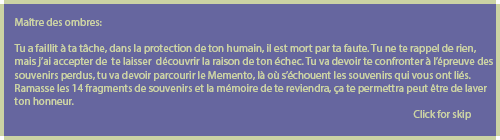
<style>
.page{position:relative;width:500px;height:140px;background:#66669f}
.page>*{position:absolute;margin:0}
.t1{font:11px "MyriadPro-Regular";color:#cbd2a4}
</style>
<div class="page">
<p class="t1" style="left:14px;top:18px;width:479px;height:102px">Maître des ombres:<br><br>Tu a faillit à ta tâche, dans la protection de ton humain, il est mort par ta faute. Tu ne te rappel de rien, mais j’ai accepter de  te laisser  découvrir la raison de ton échec. Tu va devoir te confronter à l’épreuve des souvenirs perdus, tu va devoir parcourir le Memento, là où s’échouent les souvenirs qui vous ont liés.<br>Ramasse les 14 fragments de souvenirs et la mémoire de te reviendra, ça te permettra peut être de laver ton honneur.<br>                                                                                                                                                                           Click for skip</p>
</div>
